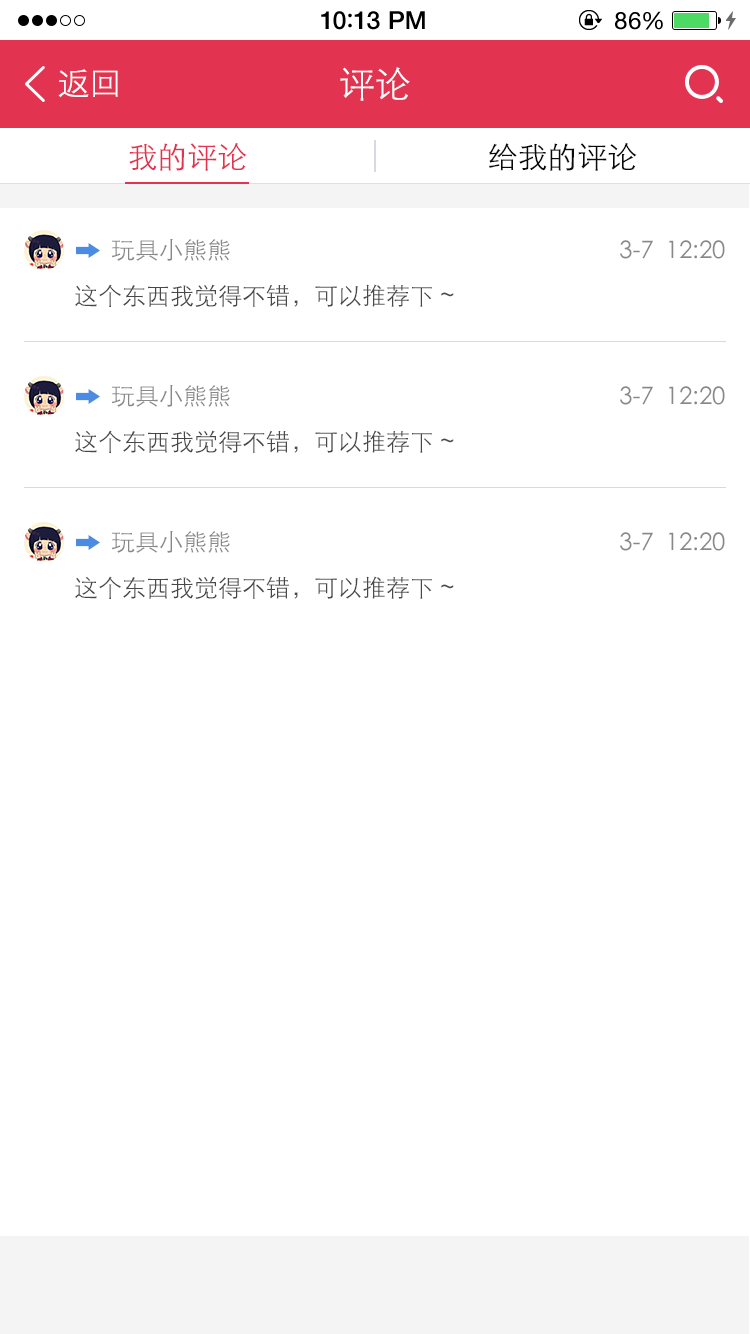
<style>
.page{position:relative;width:750px;height:1334px;background:#ffffff}
.page>*{position:absolute;margin:0}
.t1{font:25px "HelveticaNeue-Medium";letter-spacing:0.015em;color:#000000}
.t2{font:25px "ArialRoundedMTBold";letter-spacing:0.015em;color:#000000}
.t3{font:24px "HelveticaNeue";letter-spacing:0.03em;color:#000000}
.t4{font:33px "STXihei";color:#ffffff}
.t5{font:36px "STXihei";color:#ffffff}
.t6{font:30px "STXihei";color:#e23351}
.t7{font:30px "STXihei";color:#0a0a0a}
.t8{font:24px "STXihei";color:#888888}
.t9{font:24px "STXihei";color:#48484a}
</style>
<div class="page">
<p class="t1" style="left:321px;top:11px;width:104px;height:19px">10<span class="t2">:</span>13 PM</p>
<p class="t3" style="left:615px;top:11px;width:48px;height:19px">86%</p>
<p class="t4" style="left:58px;top:69px;width:60px;height:29px">返回</p>
<p class="t5" style="left:340px;top:67px;width:70px;height:34px">评论</p>
<p class="t6" style="left:129px;top:142px;width:118px;height:29px">我的评论</p>
<p class="t7" style="left:489px;top:142px;width:148px;height:29px">给我的评论</p>
<p class="t8" style="left:111px;top:239px;width:119px;height:22px">玩具小熊熊</p>
<p class="t8" style="left:620px;top:240px;width:105px;height:19px">3-7  12:20</p>
<p class="t9" style="left:75px;top:284px;width:379px;height:23px">这个东西我觉得不错，可以推荐下~</p>
<p class="t8" style="left:111px;top:385px;width:119px;height:22px">玩具小熊熊</p>
<p class="t8" style="left:620px;top:386px;width:105px;height:19px">3-7  12:20</p>
<p class="t9" style="left:75px;top:430px;width:379px;height:23px">这个东西我觉得不错，可以推荐下~</p>
<p class="t8" style="left:111px;top:531px;width:119px;height:22px">玩具小熊熊</p>
<p class="t8" style="left:620px;top:532px;width:105px;height:19px">3-7  12:20</p>
<p class="t9" style="left:75px;top:576px;width:379px;height:23px">这个东西我觉得不错，可以推荐下~</p>
</div>
